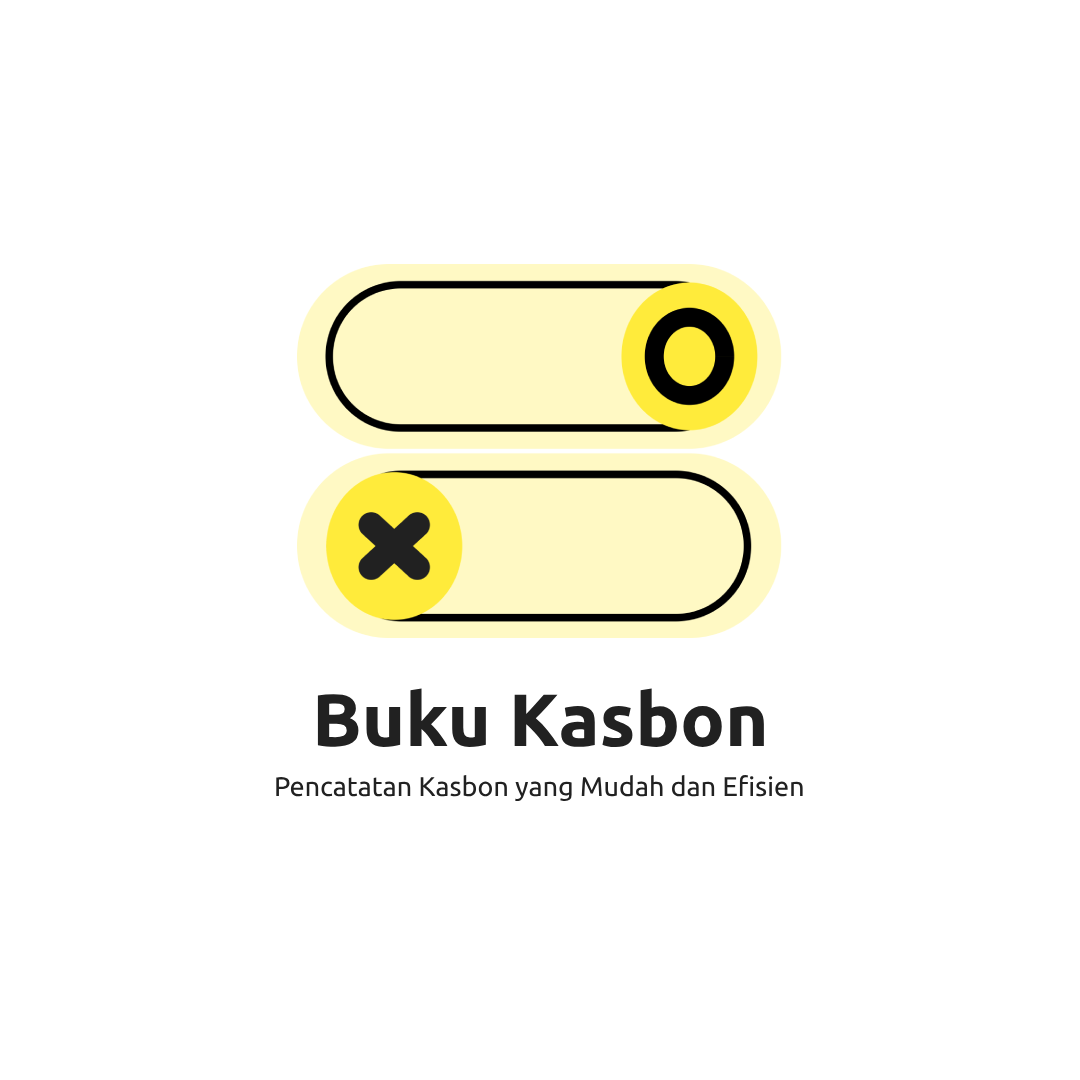
<style>
.page{position:relative;width:1080px;height:1080px;background:#ffffff}
.page>*{position:absolute;margin:0}
.t1{font:74px "Ubuntu-Bold";color:#212121}
.t2{font:27px "Ubuntu-Regular";color:#212121}
</style>
<div class="page">
<p class="t1" style="left:317px;top:688px;width:447px;height:60px">Buku Kasbon</p>
<p class="t2" style="left:276px;top:775px;width:527px;height:27px">Pencatatan Kasbon yang Mudah dan Efisien</p>
</div>
